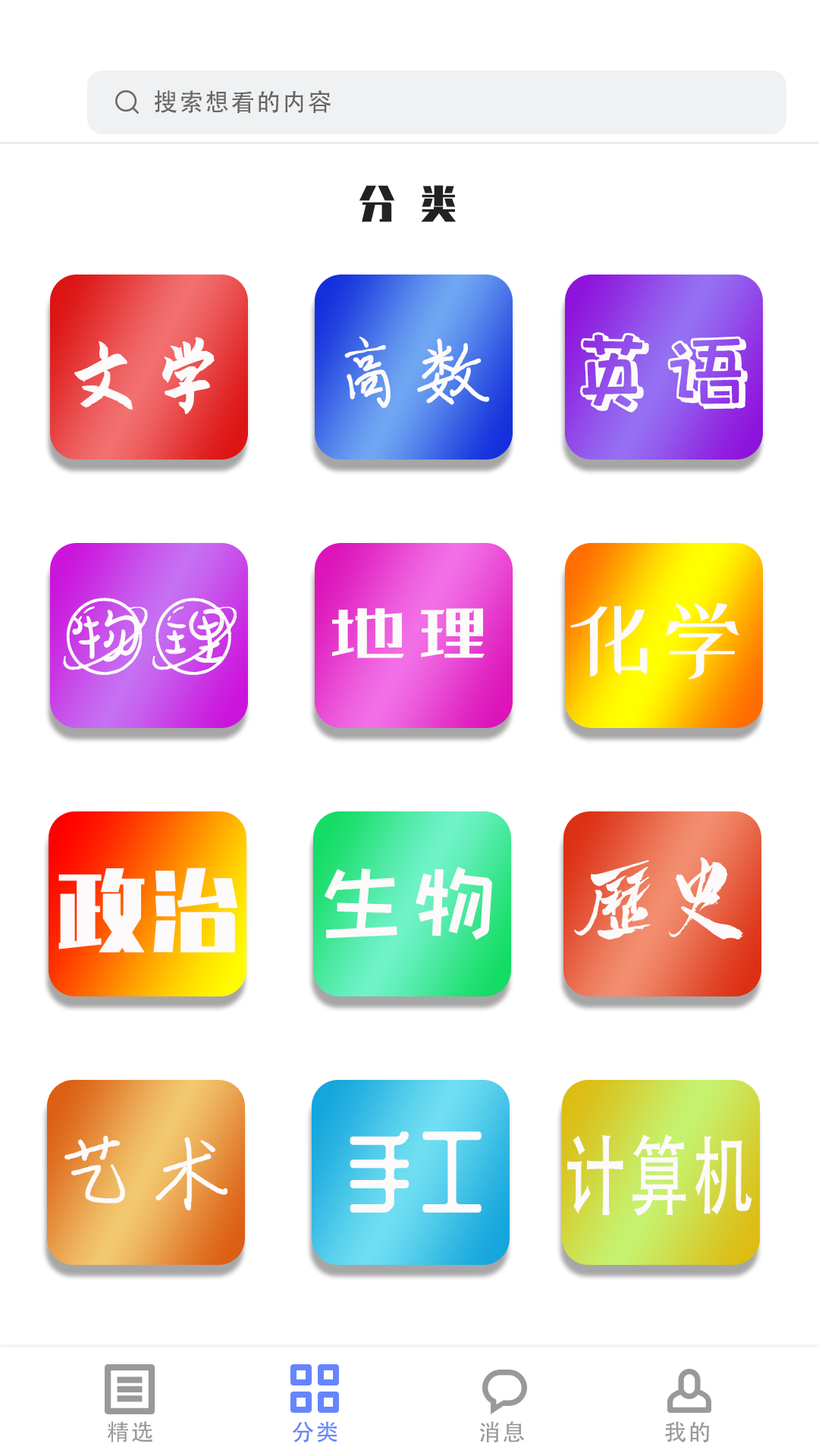
<style>
.page{position:relative;width:819px;height:1456px;background:#ffffff}
.page>*{position:absolute;margin:0}
.t1{font:24.3px "AdobeHeitiStd-Regular";letter-spacing:0.06em;color:#666666}
.t2{font:37.9px "ZhenyanGB-Regular";letter-spacing:0.06em;color:#222222}
.t3{font:80px "PangMenZhengDao-Cu";letter-spacing:0.06em;color:#fcfafa}
.t4{font:80px "ShouShuti";letter-spacing:0.06em;color:#fcfafa}
.t5{font:88px "baotuxiaobaiti";letter-spacing:0.06em;color:#fcfafa}
.t6{font:80px "yuzhou-Regular";letter-spacing:0.06em;color:#fcfafa}
.t7{font:88px "xiaowei";letter-spacing:0.06em;color:#fcfafa}
.t8{font:80px "zcool-gdh";letter-spacing:0.06em;color:#fcfafa}
.t9{font:87.9px "HBJGTPFT--GB1-0";letter-spacing:0.06em;color:#fcfafa}
.t10{font:87.9px "ZhenyanGB-Regular";letter-spacing:0.06em;color:#fcfafa}
.t11{font:87.9px "HappyZcool-2016";letter-spacing:0.06em;color:#fcfafa}
.t12{font:88px "zcoolqingkehuangyouti-Regular";letter-spacing:0.06em;color:#fcfafa}
.t13{font:88px "ShouShuti";letter-spacing:0.06em;color:#fcfafa}
.t14{font:86.3px "AdobeHeitiStd-Regular";letter-spacing:0.06em;color:#fcfafa;scale:0.7 1}
.t15{font:22.7px "AdobeHeitiStd-Regular";letter-spacing:0.06em;color:#999999}
.t16{font:22.7px "AdobeHeitiStd-Regular";letter-spacing:0.06em;color:#6685fc}
</style>
<div class="page">
<p class="t1" style="left:155px;top:90px;width:176px;height:24px">搜索想看的内容</p>
<p class="t2" style="left:359px;top:185px;width:98px;height:37px">分 类</p>
<p class="t3" style="left:74px;top:337px;width:141px;height:77px">文学</p>
<p class="t4" style="left:344px;top:337px;width:146px;height:71px">高数</p>
<p class="t5" style="left:580px;top:332px;width:168px;height:81px">英语</p>
<p class="t6" style="left:63px;top:598px;width:174px;height:77px">物理</p>
<p class="t7" style="left:570px;top:603px;width:169px;height:76px">化学</p>
<p class="t8" style="left:332px;top:608px;width:153px;height:50px">地理</p>
<p class="t9" style="left:574px;top:857px;width:170px;height:83px">历史</p>
<p class="t10" style="left:58px;top:868px;width:179px;height:84px">政治</p>
<p class="t11" style="left:324px;top:867px;width:168px;height:73px">生物</p>
<p class="t12" style="left:350px;top:1131px;width:132px;height:82px">手工</p>
<p class="t13" style="left:64px;top:1135px;width:163px;height:76px">艺术</p>
<p class="t14" style="left:567px;top:1134px;width:185px;height:82px">计算机</p>
<p class="t15" style="left:107px;top:1421px;width:46px;height:21px">精选</p>
<p class="t16" style="left:292px;top:1421px;width:45px;height:21px">分类</p>
<p class="t15" style="left:480px;top:1421px;width:44px;height:21px">消息</p>
<p class="t15" style="left:665px;top:1421px;width:44px;height:21px">我的</p>
</div>
